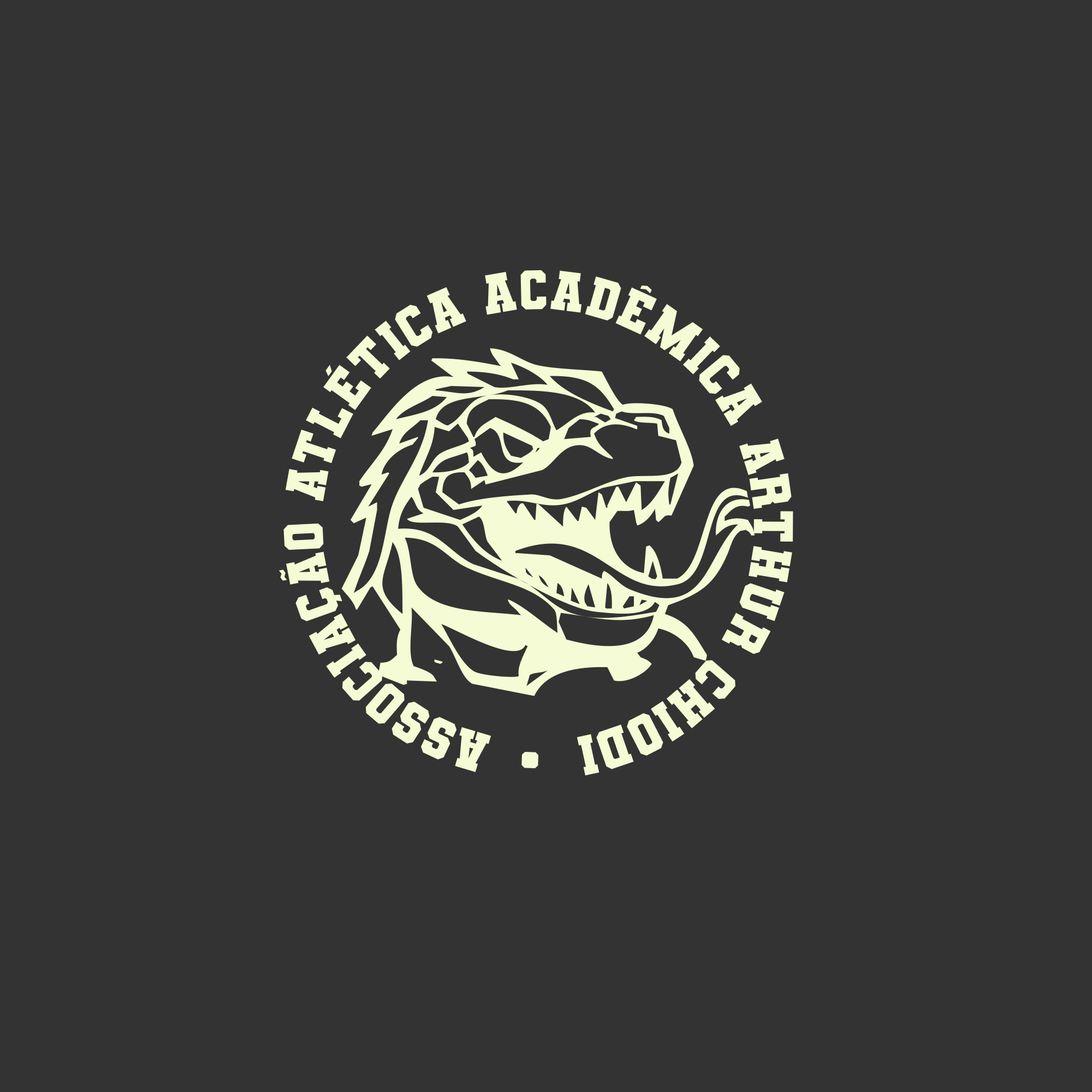
<style>
.page{position:relative;width:1092px;height:1092px;background:#333333}
.page>*{position:absolute;margin:0}
.t1{font:55.7px "VarsityTeamBold";color:#f5fbd4}
</style>
<div class="page">
<p class="t1" style="left:279px;top:270px;width:514px;height:506px;rotate:-135deg">Associação Atlética Acadêmica Arthur Chiodi  •</p>
</div>
